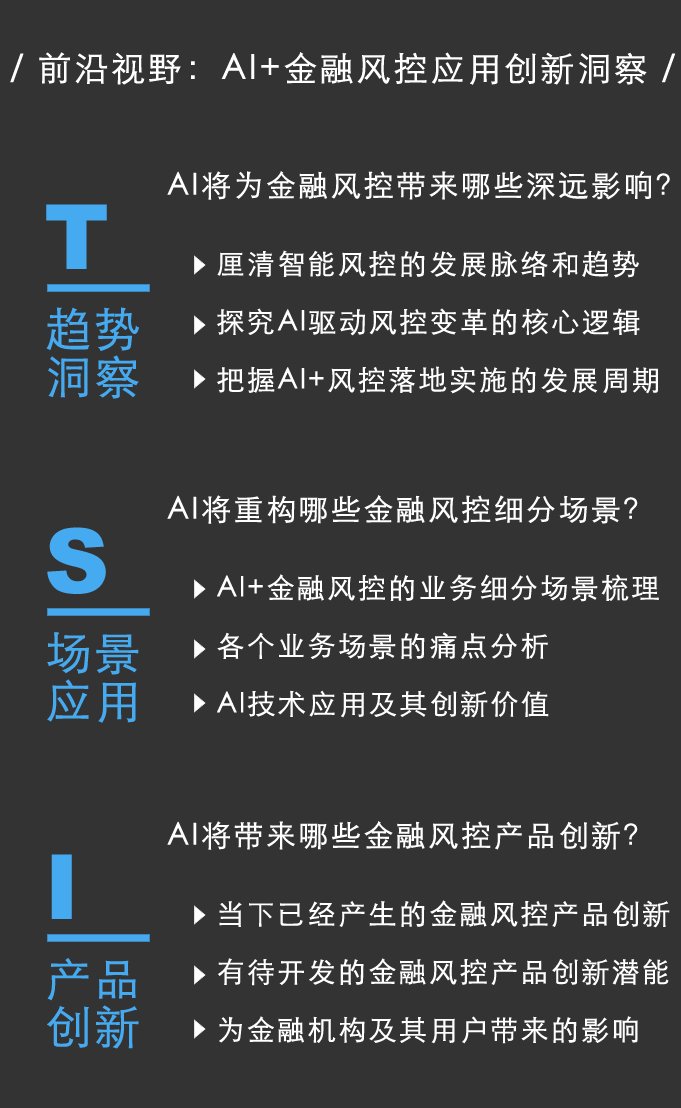
<style>
.page{position:relative;width:681px;height:1108px;background:#333333}
.page>*{position:absolute;margin:0}
.t1{font:34px "STHeitiSC-Light";letter-spacing:0.05em;color:#ffffff;font-weight:bold}
.t2{font:30px "STHeitiSC-Light";letter-spacing:0.05em;color:#ffffff;font-weight:bold}
.t3{font:90px "Arial-Black";letter-spacing:0.05em;color:#45aaf0}
.t4{font:28px/58px "STHeitiSC-Light";letter-spacing:0.05em;color:#ffffff;font-weight:bold}
.t5{font:46px/48px "STHeitiSC-Light";letter-spacing:0.05em;color:#45aaf0;font-weight:bold}
</style>
<div class="page">
<p class="t1" style="left:10px;top:52px;width:666px;height:33px">/ 前沿视野：AI+金融风控应用创新洞察 /</p>
<p class="t2" style="left:167px;top:171px;width:503px;height:29px">AI将为金融风控带来哪些深远影响？</p>
<p class="t3" style="left:46px;top:204px;width:61px;height:65px">T</p>
<p class="t4" style="left:217px;top:250px;width:441px;height:144px">厘清智能风控的发展脉络和趋势<br>探究AI驱动风控变革的核心逻辑<br>把握AI+风控落地实施的发展周期</p>
<p class="t5" style="left:46px;top:307px;width:93px;height:92px">趋势<br>洞察</p>
<p class="t2" style="left:167px;top:495px;width:471px;height:29px">AI将重构哪些金融风控细分场景？</p>
<p class="t3" style="left:47px;top:527px;width:59px;height:67px">S</p>
<p class="t4" style="left:217px;top:574px;width:442px;height:144px">AI+金融风控的业务细分场景梳理<br>各个业务场景的痛点分析<br>AI技术应用及其创新价值</p>
<p class="t5" style="left:47px;top:632px;width:92px;height:91px">场景<br>应用</p>
<p class="t2" style="left:167px;top:821px;width:471px;height:29px">AI将带来哪些金融风控产品创新？</p>
<p class="t3" style="left:51px;top:854px;width:21px;height:65px">I</p>
<p class="t4" style="left:218px;top:900px;width:452px;height:144px">当下已经产生的金融风控产品创新<br>有待开发的金融风控产品创新潜能<br>为金融机构及其用户带来的影响</p>
<p class="t5" style="left:47px;top:958px;width:92px;height:91px">产品<br>创新</p>
</div>
